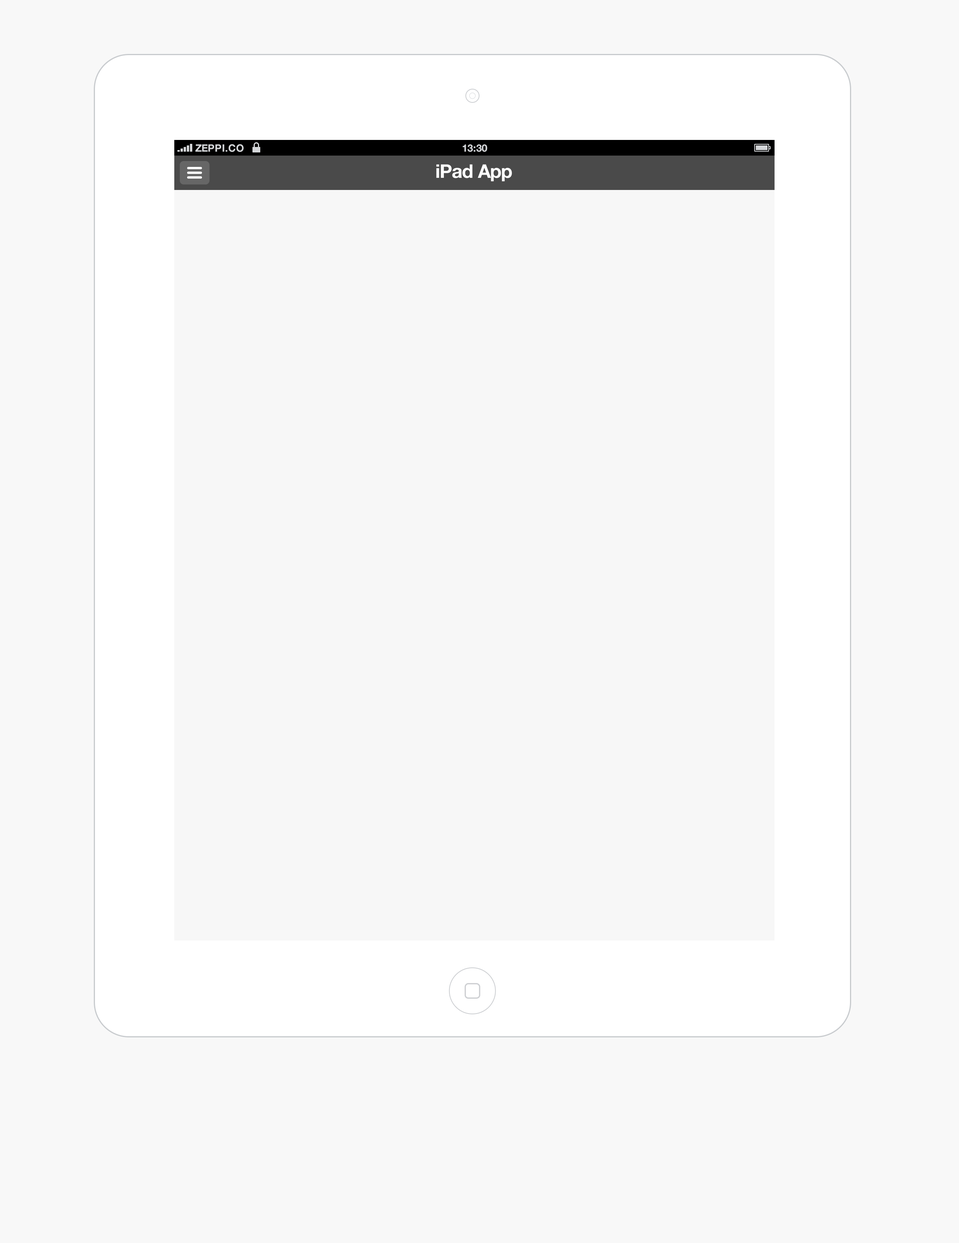
<style>
.page{position:relative;width:959px;height:1243px;background:#f7f7f7}
.page>*{position:absolute;margin:0}
.t1{font:10.2px "HelveticaNeue-Bold";letter-spacing:0.005em;color:#d4d6d9}
.t2{font:18.8px "HelveticaNeue-Bold";letter-spacing:-0.025em;color:#ffffff}
</style>
<div class="page">
<p class="t1" style="left:195px;top:144px;width:49px;height:8px">ZEPPI.CO</p>
<p class="t1" style="left:463px;top:144px;width:24px;height:8px">13:30</p>
<p class="t2" style="left:436px;top:164px;width:76px;height:17px">iPad App</p>
</div>
